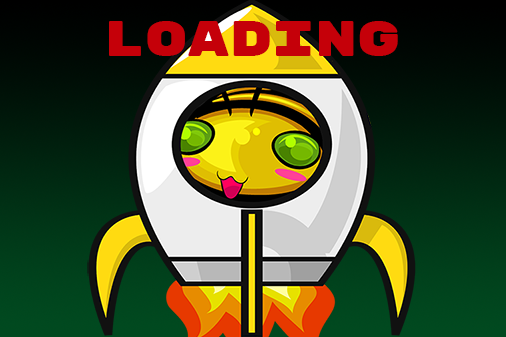
<style>
.page{position:relative;width:506px;height:337px}
.page>*{position:absolute;margin:0}
.t1{font:50px "RubikMonoOne-Regular";color:#c50009}
</style>
<div class="page">
<p class="t1" style="left:109px;top:21px;width:289px;height:35px">LOADING</p>
</div>
